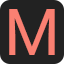
<style>
.page{position:relative;width:64px;height:64px;background:#222222}
.page>*{position:absolute;margin:0}
.t1{font:64px "Roboto-Regular";color:#fa8072}
</style>
<div class="page">
<p class="t1" style="left:9px;top:9px;width:46px;height:46px">M</p>
</div>
